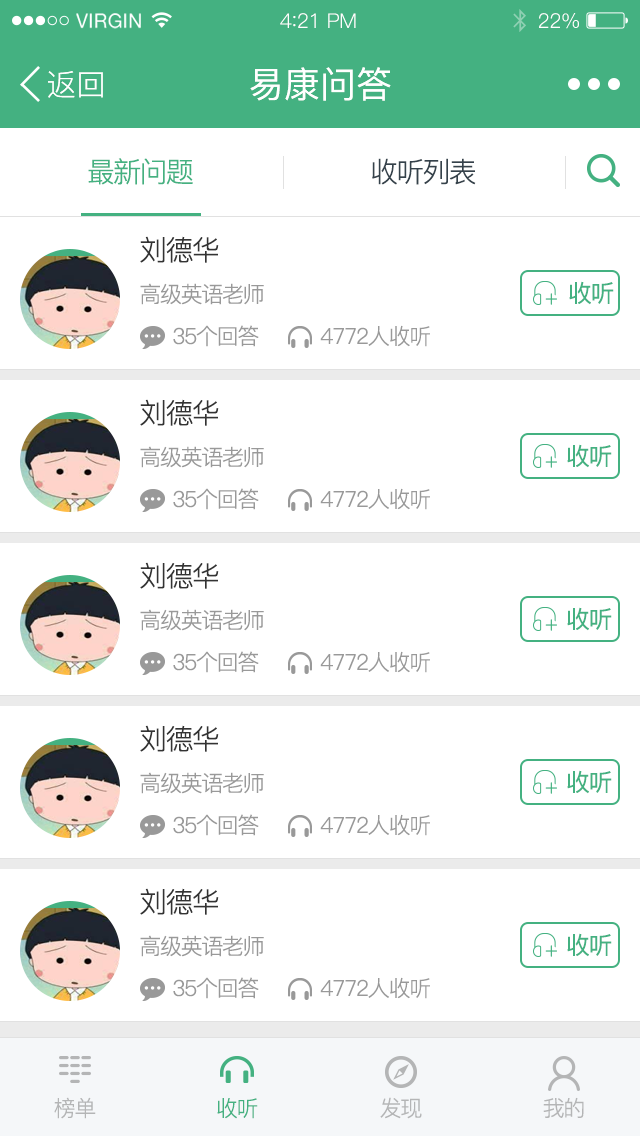
<style>
.page{position:relative;width:640px;height:1136px;background:#ffffff}
.page>*{position:absolute;margin:0}
.t1{font:19.6px "HelveticaNeue";letter-spacing:0.02em;color:#ffffff}
.t2{font:20.4px "PingFang-SC-Regular";letter-spacing:-0.02em;color:#ffffff}
.t3{font:22.1px "PingFang-SC-Regular";letter-spacing:-0.02em;color:#ffffff}
.t4{font:30px "PingFang-SC-Regular";color:#ffffff}
.t5{font:36px "PingFang-SC-Medium";color:#ffffff}
.t6{font:28px "PingFang-SC-Regular";letter-spacing:-0.06em;color:#44b181}
.t7{font:28px "PingFang-SC-Regular";letter-spacing:-0.06em;color:#35424b}
.t8{font:28px "PingFang-SC-Regular";letter-spacing:-0.06em;color:#333333}
.t9{font:24px "PingFang-SC-Medium";letter-spacing:-0.06em;color:#44b181}
.t10{font:22px "PingFang-SC-Regular";letter-spacing:-0.06em;color:#999999}
.t11{font:22px "PingFang-SC-Regular";letter-spacing:-0.06em;color:#b4b5b6}
.t12{font:22px "PingFang-SC-Regular";letter-spacing:-0.06em;color:#44b181}
</style>
<div class="page">
<p class="t1" style="left:76px;top:13px;width:65px;height:16px">VIRGIN</p>
<p class="t2" style="left:280px;top:13px;width:76px;height:15px">4<span class="t3">:</span>21 PM</p>
<p class="t2" style="left:539px;top:13px;width:40px;height:16px">22%</p>
<p class="t4" style="left:48px;top:71px;width:55px;height:27px">返回</p>
<p class="t5" style="left:250px;top:67px;width:141px;height:34px">易康问答</p>
<p class="t6" style="left:88px;top:158px;width:105px;height:27px">最新问题</p>
<p class="t7" style="left:372px;top:158px;width:104px;height:27px">收听列表</p>
<p class="t8" style="left:140px;top:236px;width:79px;height:27px">刘德华</p>
<p class="t9" style="left:569px;top:281px;width:45px;height:24px">收听</p>
<p class="t10" style="left:140px;top:283px;width:124px;height:22px">高级英语老师</p>
<p class="t10" style="left:173px;top:325px;width:86px;height:22px">35个回答</p>
<p class="t10" style="left:320px;top:325px;width:110px;height:22px">4772人收听</p>
<p class="t8" style="left:140px;top:399px;width:79px;height:27px">刘德华</p>
<p class="t10" style="left:140px;top:446px;width:124px;height:22px">高级英语老师</p>
<p class="t9" style="left:567px;top:444px;width:45px;height:24px">收听</p>
<p class="t10" style="left:173px;top:488px;width:86px;height:22px">35个回答</p>
<p class="t10" style="left:320px;top:488px;width:110px;height:22px">4772人收听</p>
<p class="t8" style="left:140px;top:562px;width:79px;height:27px">刘德华</p>
<p class="t10" style="left:140px;top:609px;width:124px;height:22px">高级英语老师</p>
<p class="t9" style="left:567px;top:607px;width:45px;height:24px">收听</p>
<p class="t10" style="left:173px;top:651px;width:86px;height:22px">35个回答</p>
<p class="t10" style="left:320px;top:651px;width:110px;height:22px">4772人收听</p>
<p class="t8" style="left:140px;top:725px;width:79px;height:27px">刘德华</p>
<p class="t10" style="left:140px;top:772px;width:124px;height:22px">高级英语老师</p>
<p class="t9" style="left:567px;top:770px;width:45px;height:24px">收听</p>
<p class="t10" style="left:173px;top:814px;width:86px;height:22px">35个回答</p>
<p class="t10" style="left:320px;top:814px;width:110px;height:22px">4772人收听</p>
<p class="t8" style="left:140px;top:888px;width:79px;height:27px">刘德华</p>
<p class="t10" style="left:140px;top:935px;width:124px;height:22px">高级英语老师</p>
<p class="t9" style="left:567px;top:933px;width:45px;height:24px">收听</p>
<p class="t10" style="left:173px;top:977px;width:86px;height:22px">35个回答</p>
<p class="t10" style="left:320px;top:977px;width:110px;height:22px">4772人收听</p>
<p class="t11" style="left:54px;top:1097px;width:42px;height:22px">榜单</p>
<p class="t11" style="left:380px;top:1097px;width:42px;height:22px">发现</p>
<p class="t11" style="left:543px;top:1097px;width:41px;height:21px">我的</p>
<p class="t12" style="left:217px;top:1098px;width:41px;height:21px">收听</p>
</div>
